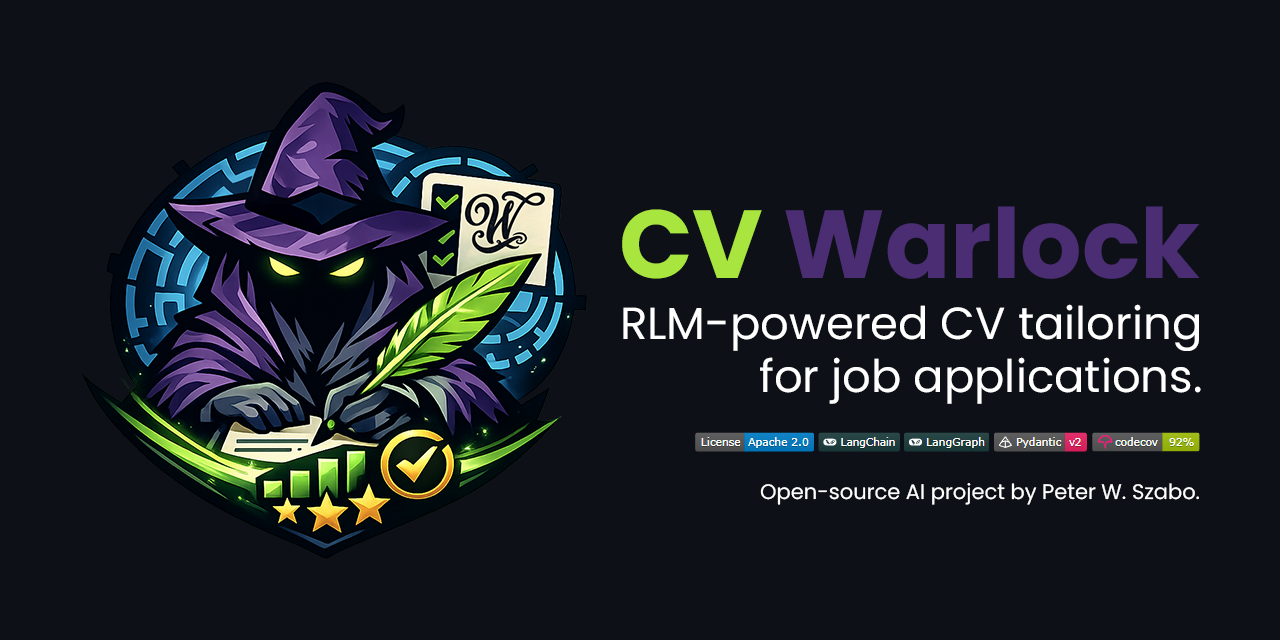
<style>
.page{position:relative;width:1280px;height:640px;background:#0d1117}
.page>*{position:absolute;margin:0}
.t1{font:96.6px "Poppins-Bold";color:#4b2d73}
.t2{font:96.6px "Poppins-Bold";color:#a9e53f}
.t3{font:44.9px "Poppins-Regular";color:#ffffff}
.t4{font:21px "Poppins-Regular";color:#ffffff}
</style>
<div class="page">
<p class="t1" style="left:622px;top:206px;width:578px;height:73px"><span class="t2">CV </span>Warlock</p>
<p class="t3" style="left:623px;top:304px;width:578px;height:100px;text-align:right">RLM-powered CV tailoring<br>for job applications.</p>
<p class="t4" style="left:760px;top:483px;width:439px;height:22px">Open-source AI project by Peter W. Szabo.</p>
</div>
